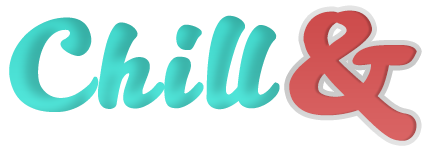
<style>
.page{position:relative;width:437px;height:154px;background:#ffffff}
.page>*{position:absolute;margin:0}
.t1{font:120.9px "KittenBold";letter-spacing:0.075em;color:#44cfc4}
.t2{font:161.4px "KittenBold";letter-spacing:0.075em;color:#d25656}
</style>
<div class="page">
<p class="t1" style="left:9px;top:15px;width:271px;height:97px">Chill</p>
<p class="t2" style="left:289px;top:10px;width:128px;height:131px">&amp;</p>
</div>
